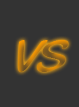
<style>
.page{position:relative;width:79px;height:107px;background:#333333}
.page>*{position:absolute;margin:0}
.t1{font:48px "UVNVungTau"}
</style>
<div class="page">
<p class="t1" style="left:18px;top:40px;width:51px;height:32px">VS</p>
</div>
